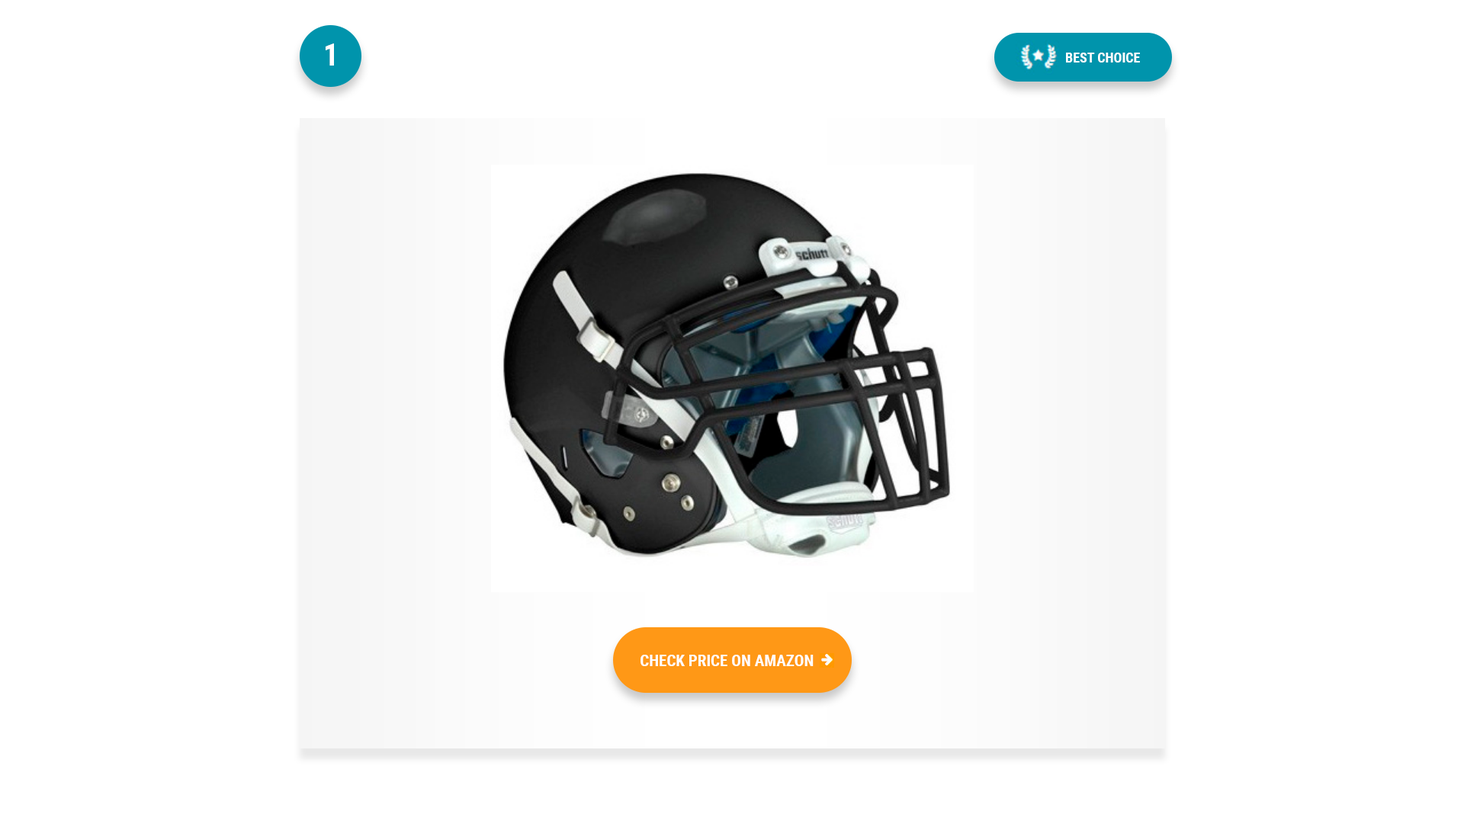
<style>
.page{position:relative;width:1464px;height:814px;background:#ffffff}
.page>*{position:absolute;margin:0}
.t1{font:30.5px "RobotoCondensed-Bold";color:#ffffff}
.t2{font:13.7px "RobotoCondensed-Bold";color:#ffffff;text-transform:uppercase}
.t3{font:16px "RobotoCondensed-Bold";color:#ffffff;text-transform:uppercase}
</style>
<div class="page">
<p class="t1" style="left:326px;top:43px;width:8px;height:23px">1</p>
<p class="t2" style="left:1066px;top:53px;width:74px;height:10px">Best choice</p>
<p class="t3" style="left:641px;top:655px;width:173px;height:11px">Check price on Amazon</p>
</div>
